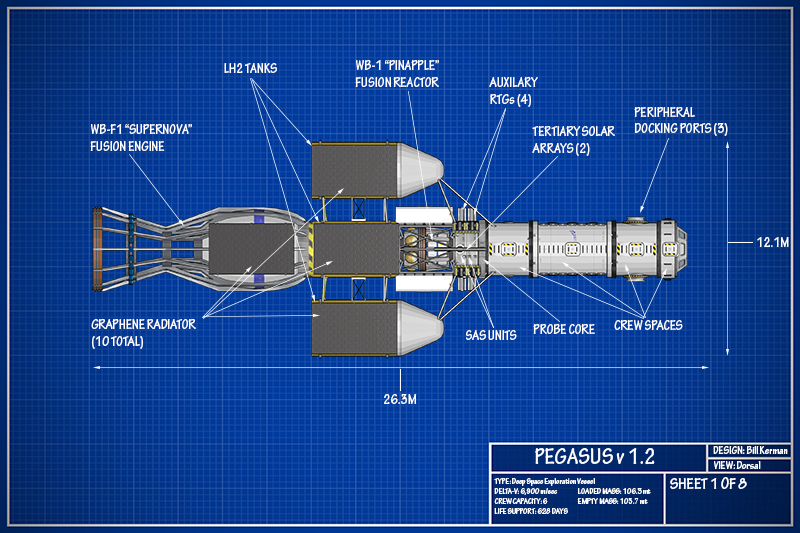
<style>
.page{position:relative;width:800px;height:533px}
.page>*{position:absolute;margin:0}
.t1{font:13.9px "TektonPro-BoldCond";color:#ffffff}
.t2{font:23.2px "TektonPro-BoldCond";color:#ffffff}
.t3{font:11.1px "TektonPro-BoldCond";color:#ffffff}
.t4{font:8.3px "TektonPro-BoldCond";color:#ffffff}
.t5{font:16.7px "TektonPro-BoldCond";color:#ffffff}
</style>
<div class="page">
<p class="t1" style="left:224px;top:63px;width:53px;height:10px">LH2 TANKS</p>
<p class="t1" style="left:355px;top:60px;width:84px;height:27px">WB-1 “PINAPPLE”<br>FUSION REACTOR</p>
<p class="t1" style="left:489px;top:77px;width:49px;height:30px">AUXILARY<br>RTGs (4)</p>
<p class="t1" style="left:634px;top:107px;width:94px;height:29px">PERIPHERAL <br>DOCKING PORTS (3)</p>
<p class="t1" style="left:90px;top:124px;width:102px;height:27px">WB-F1 “SUPERNOVA”<br>FUSION ENGINE</p>
<p class="t1" style="left:532px;top:126px;width:83px;height:30px">TERTIARY SOLAR<br>ARRAYS (2)</p>
<p class="t1" style="left:757px;top:237px;width:32px;height:10px">12.1M</p>
<p class="t1" style="left:91px;top:319px;width:105px;height:30px">GRAPHENE RADIATOR<br>(10 TOTAL)</p>
<p class="t1" style="left:533px;top:324px;width:62px;height:10px">PROBE CORE</p>
<p class="t1" style="left:614px;top:320px;width:69px;height:10px">CREW SPACES</p>
<p class="t1" style="left:466px;top:330px;width:51px;height:10px">SAS UNITS</p>
<p class="t1" style="left:384px;top:394px;width:33px;height:10px">26.3M</p>
<p class="t2" style="left:535px;top:448px;width:120px;height:17px">PEGASUS v 1.2</p>
<p class="t3" style="left:713px;top:446px;width:75px;height:8px">DESIGN: Bill Kerman</p>
<p class="t3" style="left:714px;top:461px;width:47px;height:8px">VIEW: Dorsal</p>
<p class="t4" style="left:494px;top:478px;width:157px;height:36px">TYPE: Deep Space Exploration Vessel<br>DELTA-V: 6,900 m/sec   LOADED MASS: 106.3 mt<br>CREW CAPACITY: 6    EMPTY MASS: 103.7 mt<br>LIFE SUPPORT: 628 DAYS</p>
<p class="t5" style="left:670px;top:477px;width:77px;height:12px">SHEET 1 OF 8</p>
</div>
